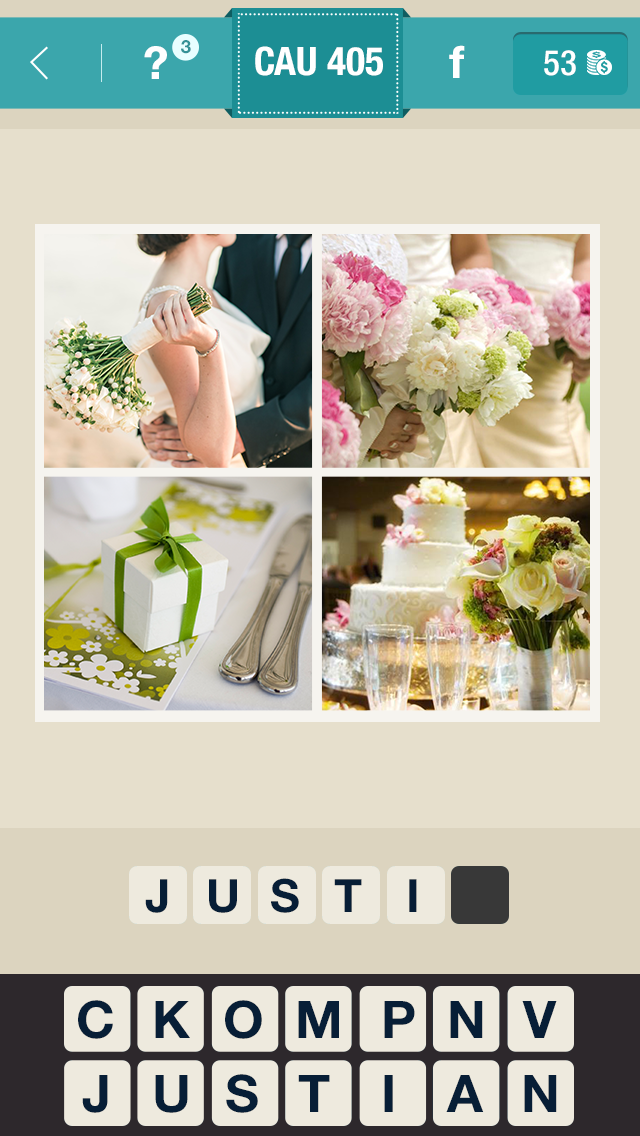
<style>
.page{position:relative;width:640px;height:1136px;background:#e6dfcc}
.page>*{position:absolute;margin:0}
.t1{font:18.3px "HelveticaNeueLTStd-Bd";color:#339196}
.t2{font:45px "HelveticaNeueLTStd-Bd";color:#fefeff}
.t3{font:39.2px "HelveticaNeueLTStd-BdCn";color:#ffffff}
.t4{font:45px "HelveticaNeueLTStd-Bd";color:#ffffff}
.t5{font:35px "HelveticaNeueLTStd-MdCn";color:#ffffff}
.t6{font:45.8px "HelveticaNeueLTStd-Bd";color:#071e36}
.t7{font:51.9px "HelveticaNeueLTStd-Bd";color:#071e36}
</style>
<div class="page">
<p class="t1" style="left:181px;top:40px;width:10px;height:14px">3</p>
<p class="t2" style="left:144px;top:46px;width:23px;height:33px">?</p>
<p class="t3" style="left:255px;top:46px;width:128px;height:30px">CAU 405</p>
<p class="t4" style="left:449px;top:45px;width:16px;height:33px">f</p>
<p class="t5" style="left:544px;top:50px;width:32px;height:26px">53</p>
<p class="t6" style="left:145px;top:879px;width:23px;height:34px">J</p>
<p class="t6" style="left:209px;top:879px;width:28px;height:34px">U</p>
<p class="t6" style="left:271px;top:878px;width:28px;height:35px">S</p>
<p class="t6" style="left:334px;top:879px;width:28px;height:33px">T</p>
<p class="t6" style="left:409px;top:879px;width:8px;height:33px">I</p>
<p class="t7" style="left:78px;top:1000px;width:35px;height:39px">C</p>
<p class="t7" style="left:155px;top:1001px;width:35px;height:37px">K</p>
<p class="t7" style="left:225px;top:1000px;width:37px;height:39px">O</p>
<p class="t7" style="left:298px;top:1001px;width:41px;height:37px">M</p>
<p class="t7" style="left:384px;top:1001px;width:31px;height:37px">P</p>
<p class="t7" style="left:450px;top:1001px;width:33px;height:37px">N</p>
<p class="t7" style="left:522px;top:1001px;width:35px;height:37px">V</p>
<p class="t7" style="left:82px;top:1075px;width:26px;height:38px">J</p>
<p class="t7" style="left:155px;top:1075px;width:33px;height:38px">U</p>
<p class="t7" style="left:226px;top:1074px;width:32px;height:39px">S</p>
<p class="t7" style="left:298px;top:1075px;width:32px;height:37px">T</p>
<p class="t7" style="left:384px;top:1075px;width:9px;height:37px">I</p>
<p class="t7" style="left:446px;top:1075px;width:38px;height:37px">A</p>
<p class="t7" style="left:524px;top:1075px;width:33px;height:37px">N</p>
</div>
